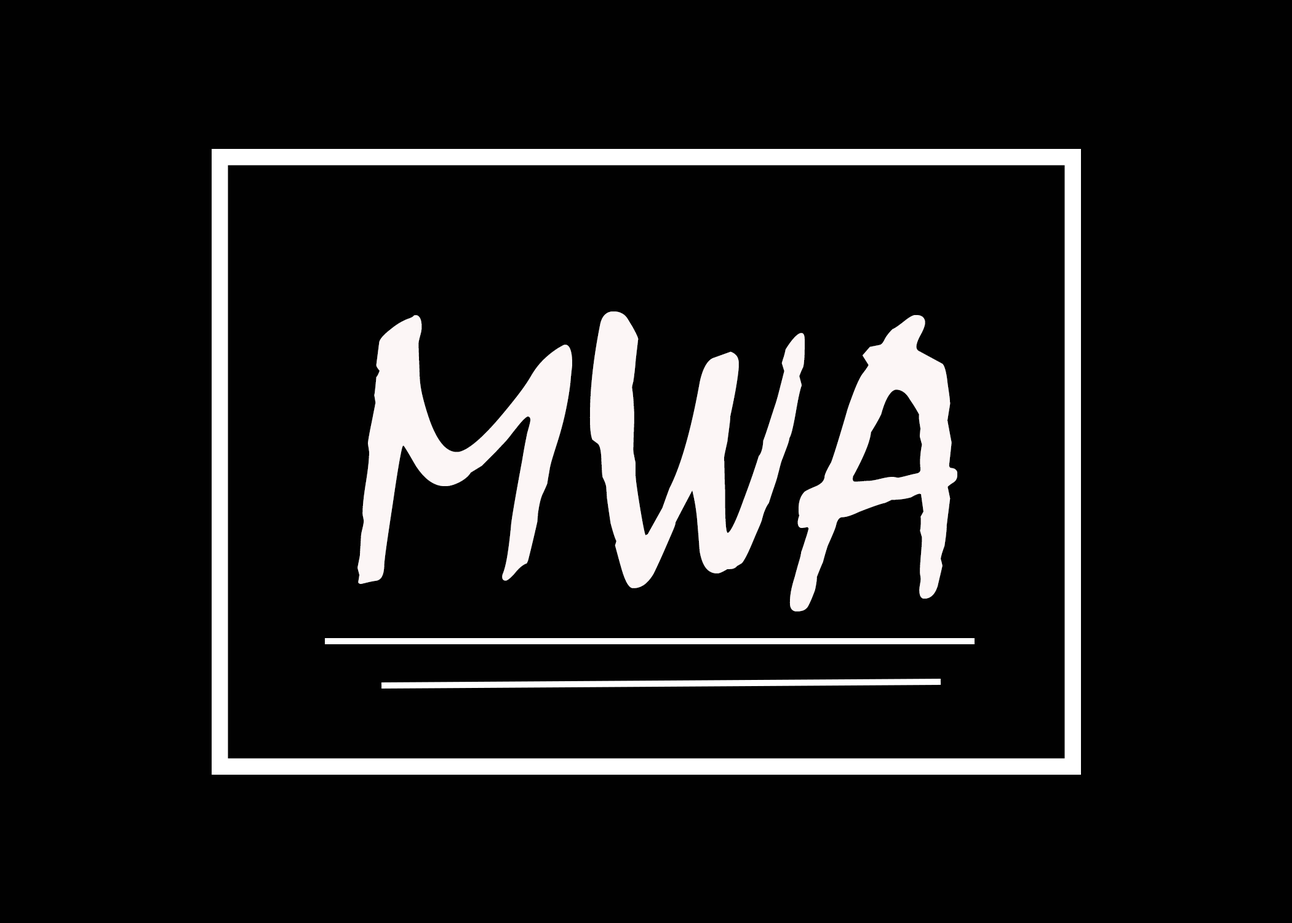
<style>
.page{position:relative;width:1292px;height:923px;background:#010101}
.page>*{position:absolute;margin:0}
.t1{font:384.5px "Mistral";color:#fcf6f6}
</style>
<div class="page">
<p class="t1" style="left:357px;top:311px;width:600px;height:301px">MWA</p>
</div>
